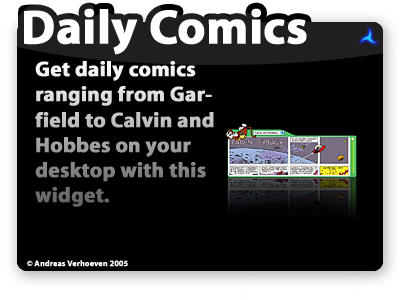
<style>
.page{position:relative;width:400px;height:300px;background:#000000}
.page>*{position:absolute;margin:0}
.t1{font:21px "MyriadBold";font-weight:bold}
.t2{font:8px "MyriadBold";font-weight:bold}
.t3{font:8px "MyriadBold";color:#ffffff;font-weight:bold}
</style>
<div class="page">
<p class="t1" style="left:35px;top:61px;width:179px;height:146px">Get daily comics ranging from Garfield to Calvin and Hobbes on your desktop with this widget.</p>
<p class="t2" style="left:27px;top:260px;width:160px;height:7px">© Andreas Verhoeven &amp; Javier Ocasio 2005</p>
<p class="t3" style="left:27px;top:260px;width:101px;height:7px">© Andreas Verhoeven 2005</p>
</div>
